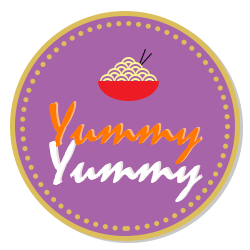
<style>
.page{position:relative;width:250px;height:250px;background:#a864a8}
.page>*{position:absolute;margin:0}
.t1{font:62.5px/37.5px "Mistral";color:#ff7800}
.t2{font:62.5px/37.5px "Mistral";color:#ffffff}
.t3{font:62.5px/37.5px "Mistral"}
</style>
<div class="page">
<p class="t1" style="left:49px;top:102px;width:152px;height:100px;text-align:center">Yummy<br><span class="t2">Yummy</span></p>
<p class="t3" style="left:51px;top:101px;width:152px;height:100px;text-align:center">Yummy<br>Yummy</p>
</div>
